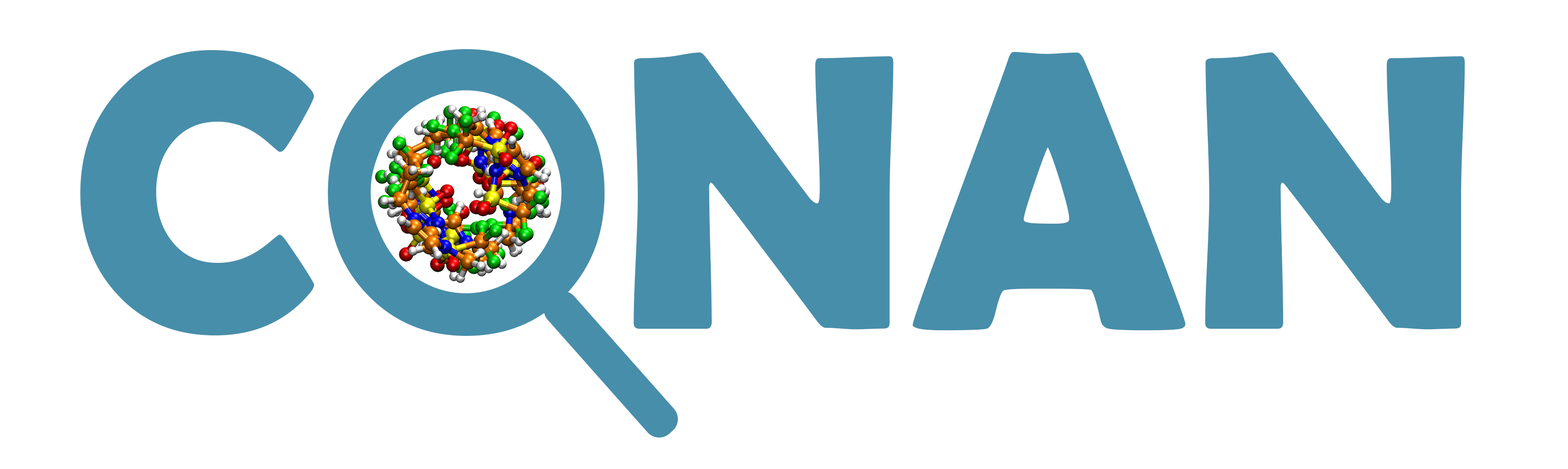
<style>
.page{position:relative;width:1568px;height:469px;background:#ffffff}
.page>*{position:absolute;margin:0}
.t1{font:397.5px "BerlinSansFBDemi-Bold";color:#478eaa}
</style>
<div class="page">
<p class="t1" style="left:80px;top:49px;width:1385px;height:287px">CONAN</p>
</div>
